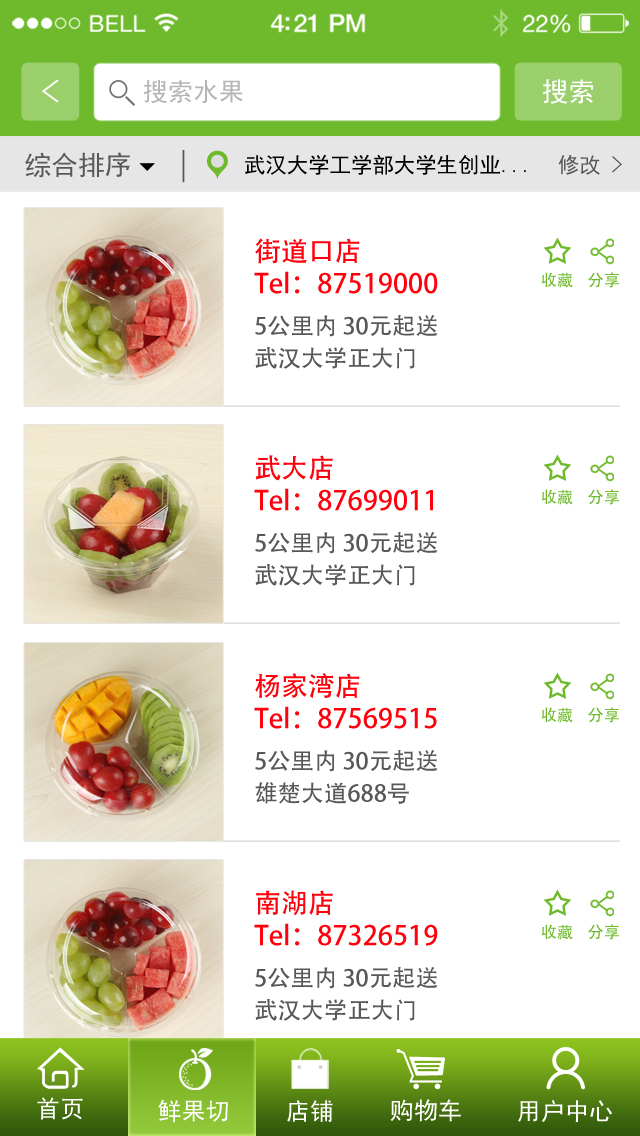
<style>
.page{position:relative;width:640px;height:1136px;background:#ffffff}
.page>*{position:absolute;margin:0}
.t1{font:32.3px "SimHei";color:#ffffff;scale:1.23 1}
.t2{font:25.3px "SimHei";color:#b4b4b4}
.t3{font:26.8px "SimHei";color:#ffffff}
.t4{font:26.8px "SimHei";color:#595757}
.t5{font:21.4px "SimHei";color:#000000}
.t6{font:21.4px "SimHei";color:#595757}
.t7{font:23.2px "SimHei";color:#595757}
.t8{font:26.9px "AdobeHeitiStd-Regular";color:#ff000c}
.t9{font:16.1px "AdobeHeitiStd-Regular";color:#6fba2c}
.t10{font:23.3px "AdobeHeitiStd-Regular";color:#595757}
.t11{font:24.1px "SimHei";color:#ffffff}
</style>
<div class="page">
<p class="t1" style="left:41px;top:79px;width:18px;height:24px">&lt;</p>
<p class="t2" style="left:143px;top:80px;width:100px;height:24px">搜索水果</p>
<p class="t3" style="left:542px;top:79px;width:52px;height:25px">搜索</p>
<p class="t4" style="left:25px;top:152px;width:105px;height:26px">综合排序</p>
<p class="t5" style="left:245px;top:154px;width:281px;height:21px">武汉大学工学部大学生创业...</p>
<p class="t6" style="left:558px;top:154px;width:64px;height:21px">修改 <span class="t7">&gt;</span></p>
<p class="t8" style="left:254px;top:238px;width:184px;height:56px">街道口店  <br>Tel：87519000</p>
<p class="t9" style="left:541px;top:272px;width:32px;height:16px">收藏</p>
<p class="t9" style="left:588px;top:272px;width:31px;height:16px">分享</p>
<p class="t10" style="left:255px;top:315px;width:183px;height:22px">5公里内 30元起送</p>
<p class="t10" style="left:255px;top:346px;width:160px;height:23px">武汉大学正大门</p>
<p class="t8" style="left:254px;top:455px;width:179px;height:56px">武大店  <br>Tel：87699011</p>
<p class="t9" style="left:541px;top:489px;width:32px;height:16px">收藏</p>
<p class="t9" style="left:588px;top:489px;width:31px;height:16px">分享</p>
<p class="t10" style="left:255px;top:532px;width:183px;height:22px">5公里内 30元起送</p>
<p class="t10" style="left:255px;top:563px;width:160px;height:23px">武汉大学正大门</p>
<p class="t8" style="left:254px;top:673px;width:183px;height:56px">杨家湾店  <br>Tel：87569515</p>
<p class="t9" style="left:541px;top:707px;width:32px;height:16px">收藏</p>
<p class="t9" style="left:588px;top:707px;width:31px;height:16px">分享</p>
<p class="t10" style="left:255px;top:750px;width:183px;height:22px">5公里内 30元起送</p>
<p class="t10" style="left:255px;top:782px;width:154px;height:22px">雄楚大道688号</p>
<p class="t8" style="left:254px;top:890px;width:184px;height:56px">南湖店  <br>Tel：87326519</p>
<p class="t9" style="left:541px;top:924px;width:32px;height:16px">收藏</p>
<p class="t9" style="left:588px;top:924px;width:31px;height:16px">分享</p>
<p class="t10" style="left:255px;top:967px;width:183px;height:22px">5公里内 30元起送</p>
<p class="t10" style="left:255px;top:998px;width:160px;height:23px">武汉大学正大门</p>
<p class="t11" style="left:37px;top:1097px;width:46px;height:23px">首页</p>
<p class="t11" style="left:158px;top:1099px;width:70px;height:24px">鲜果切</p>
<p class="t11" style="left:287px;top:1100px;width:46px;height:22px">店铺</p>
<p class="t11" style="left:390px;top:1099px;width:71px;height:23px">购物车</p>
<p class="t11" style="left:518px;top:1100px;width:95px;height:22px">用户中心</p>
</div>
